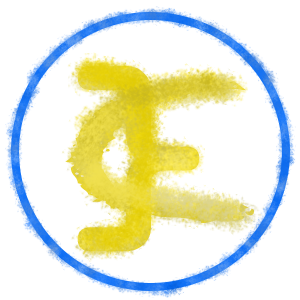
<style>
.page{position:relative;width:300px;height:300px;background:#ffffff}
.page>*{position:absolute;margin:0}
.t1{font:237.9px "OCRAStd";color:#e7d52f;scale:1.03 1}
.t2{font:260.4px "DKCrayonCrumble";color:#e2d343;scale:1.74 1}
</style>
<div class="page">
<p class="t1" style="left:77px;top:66px;width:123px;height:186px">}</p>
<p class="t2" style="left:65px;top:79px;width:189px;height:144px">C</p>
</div>
